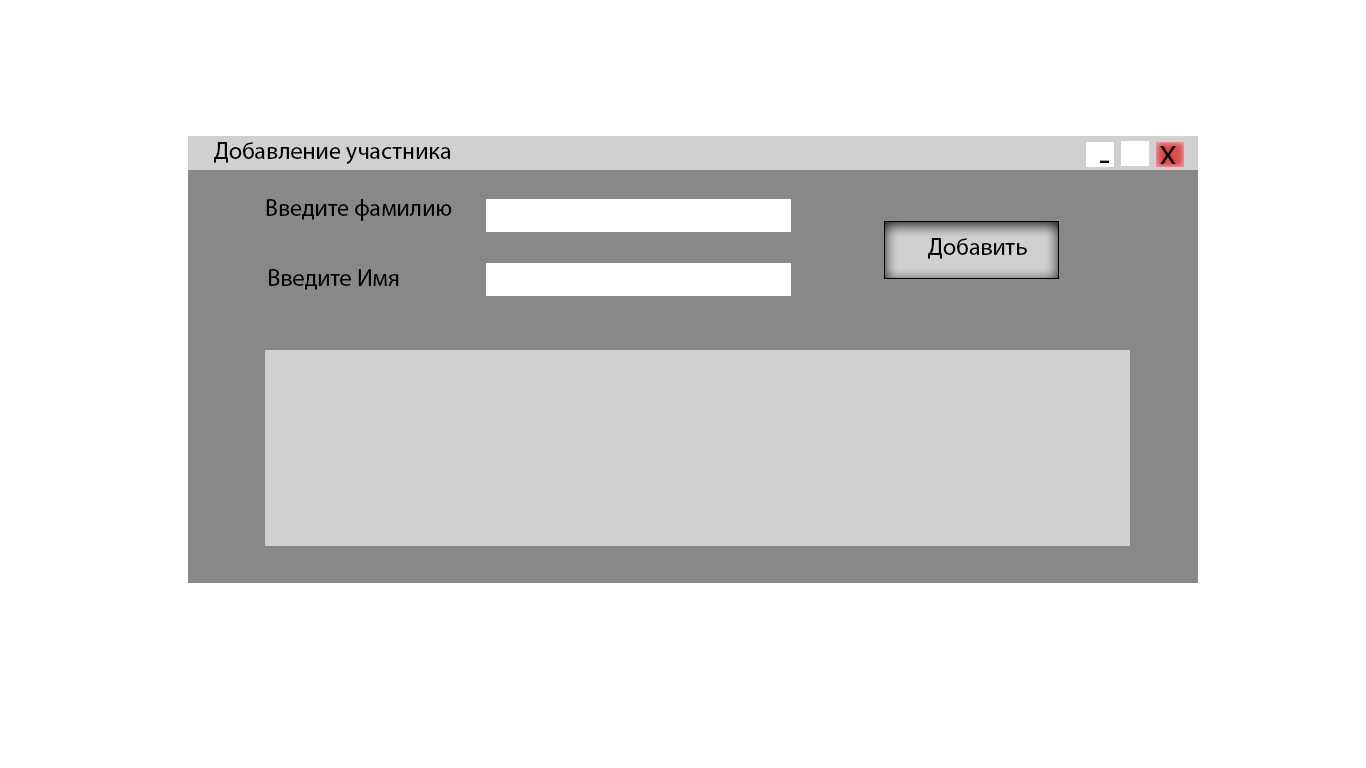
<style>
.page{position:relative;width:1366px;height:768px;background:#ffffff}
.page>*{position:absolute;margin:0}
.t1{font:24px "MyriadPro-Regular";color:#000000}
.t2{font:36px "MyriadPro-Regular";color:#000000}
</style>
<div class="page">
<p class="t1" style="left:214px;top:142px;width:237px;height:22px">Добавление участника</p>
<p class="t2" style="left:1160px;top:146px;width:16px;height:18px">х</p>
<p class="t2" style="left:1100px;top:160px;width:9px;height:3px">-</p>
<p class="t1" style="left:266px;top:199px;width:186px;height:22px">Введите фамилию</p>
<p class="t1" style="left:928px;top:238px;width:99px;height:21px">Добавить</p>
<p class="t1" style="left:269px;top:269px;width:130px;height:21px">Введите Имя</p>
</div>
